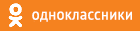
<style>
.page{position:relative;width:140px;height:31px;background:#f5821f}
.page>*{position:absolute;margin:0}
.t1{font:15.7px "PTSans-Narrow";letter-spacing:0.025em;color:#ffffff;scale:1.15 1}
</style>
<div class="page">
<p class="t1" style="left:32px;top:11px;width:100px;height:11px">одноклассники</p>
</div>
